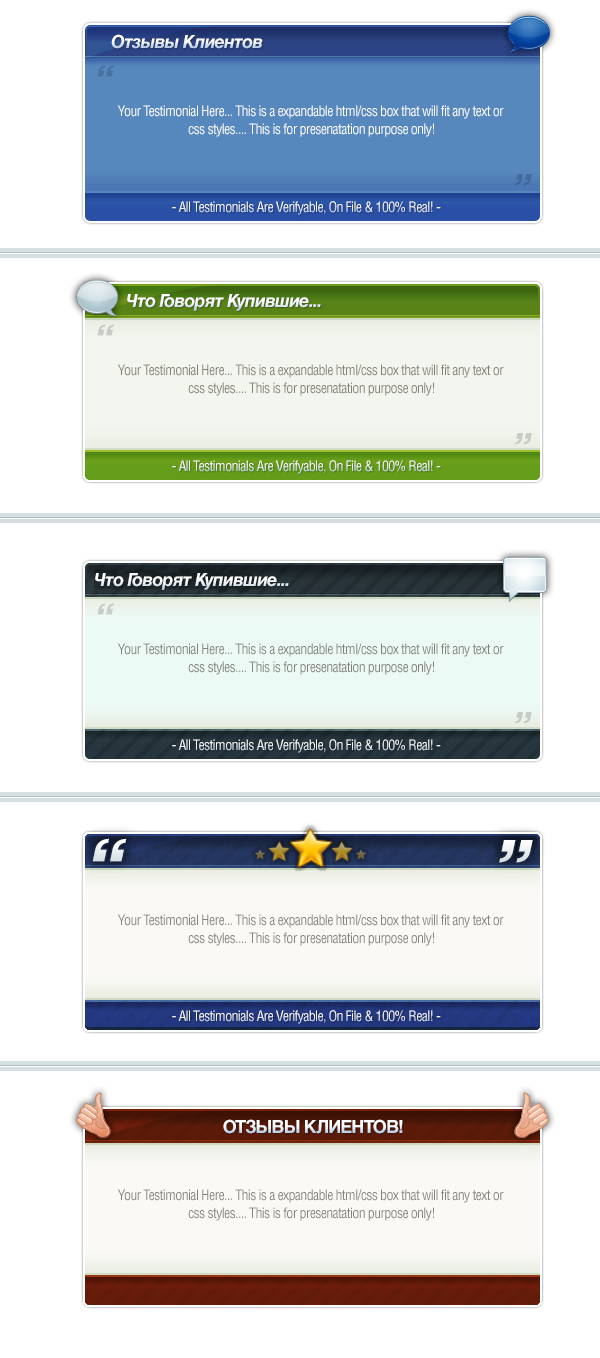
<style>
.page{position:relative;width:600px;height:1358px;background:#ffffff}
.page>*{position:absolute;margin:0}
.t1{font:18px "HelveticaCyr-BoldInclined";letter-spacing:-0.05em}
.t2{font:14px/18px "Helvetica-Condensed";letter-spacing:-0.05em;color:#ffffff}
.t3{font:14px "Helvetica-Condensed";letter-spacing:-0.05em;color:#ffffff}
.t4{font:18px "HelveticaCyr-BoldInclined";letter-spacing:-0.05em;color:#ffffff}
.t5{font:14px/18px "Helvetica-Condensed";letter-spacing:-0.05em;color:#848077}
.t6{font:14px/18px "Helvetica-Condensed";letter-spacing:-0.05em;color:#82817a}
.t7{font:72px "Helvetica-Condensed-BlackObl";letter-spacing:-0.05em;color:#ffffff}
.t8{font:14px/18px "Helvetica-Condensed";letter-spacing:-0.05em;color:#87817a}
.t9{font:18px "HelveticaCyr-Bold";letter-spacing:-0.05em;color:#ffffff;text-transform:uppercase}
</style>
<div class="page">
<p class="t1" style="left:111px;top:34px;width:152px;height:15px">Отзывы Клиентов</p>
<p class="t2" style="left:117px;top:105px;width:387px;height:32px;text-align:center">Your Testimonial Here... This is a expandable html/css box that will fit any text or <br>css styles.... This is for presenatation purpose only!</p>
<p class="t3" style="left:172px;top:201px;width:269px;height:14px">- All Testimonials Are Verifyable, On File &amp; 100% Real! -</p>
<p class="t4" style="left:127px;top:294px;width:194px;height:17px">Что Говорят Купившие...</p>
<p class="t5" style="left:117px;top:364px;width:387px;height:32px;text-align:center">Your Testimonial Here... This is a expandable html/css box that will fit any text or <br>css styles.... This is for presenatation purpose only!</p>
<p class="t3" style="left:172px;top:460px;width:269px;height:14px">- All Testimonials Are Verifyable, On File &amp; 100% Real! -</p>
<p class="t4" style="left:95px;top:573px;width:194px;height:17px">Что Говорят Купившие...</p>
<p class="t6" style="left:117px;top:643px;width:387px;height:32px;text-align:center">Your Testimonial Here... This is a expandable html/css box that will fit any text or <br>css styles.... This is for presenatation purpose only!</p>
<p class="t3" style="left:172px;top:739px;width:269px;height:14px">- All Testimonials Are Verifyable, On File &amp; 100% Real! -</p>
<p class="t7" style="left:92px;top:838px;width:441px;height:25px">“                          ”</p>
<p class="t8" style="left:117px;top:914px;width:387px;height:32px;text-align:center">Your Testimonial Here... This is a expandable html/css box that will fit any text or <br>css styles.... This is for presenatation purpose only!</p>
<p class="t3" style="left:172px;top:1010px;width:269px;height:14px">- All Testimonials Are Verifyable, On File &amp; 100% Real! -</p>
<p class="t9" style="left:223px;top:1119px;width:180px;height:15px">ОТЗЫВЫ КЛИЕНТОВ!</p>
<p class="t8" style="left:117px;top:1189px;width:387px;height:32px;text-align:center">Your Testimonial Here... This is a expandable html/css box that will fit any text or <br>css styles.... This is for presenatation purpose only!</p>
</div>
